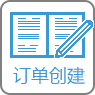
<style>
.page{position:relative;width:95px;height:95px;background:#ffffff}
.page>*{position:absolute;margin:0}
.t1{font:18px "MicrosoftYaHei";color:#3998d6}
</style>
<div class="page">
<p class="t1" style="left:13px;top:67px;width:72px;height:18px">订单创建</p>
</div>
